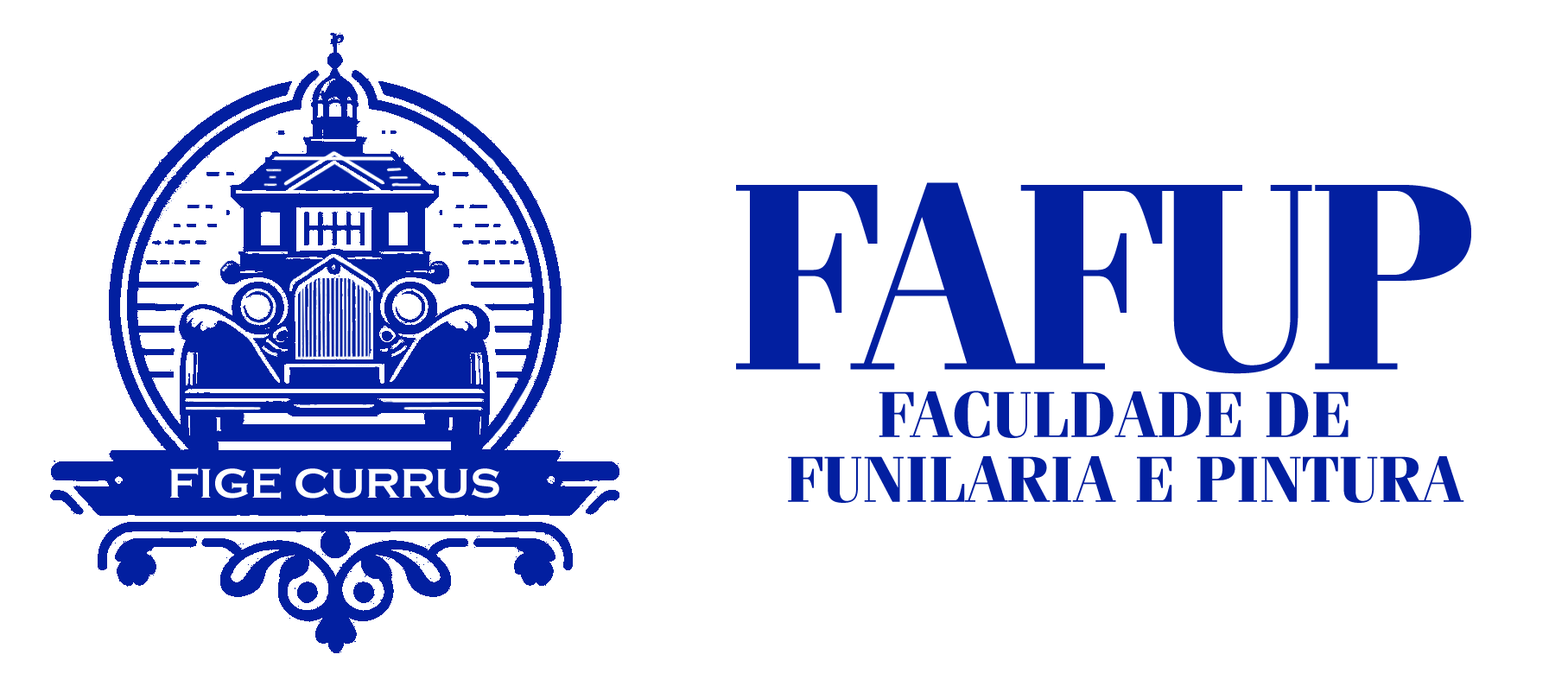
<style>
.page{position:relative;width:1568px;height:699px;background:#ffffff}
.page>*{position:absolute;margin:0}
.t1{font:266.4px "FeniceStd-Bold";letter-spacing:-0.04em;color:#021fa0;text-transform:uppercase}
.t2{font:64.8px/64.8px "FeniceStd-Bold";color:#021fa0;text-transform:uppercase}
</style>
<div class="page">
<p class="t1" style="left:736px;top:182px;width:735px;height:192px">FAFUP</p>
<p class="t2" style="left:788px;top:390px;width:676px;height:113px;text-align:center">Faculdade de <br>funilaria e pintura</p>
</div>
